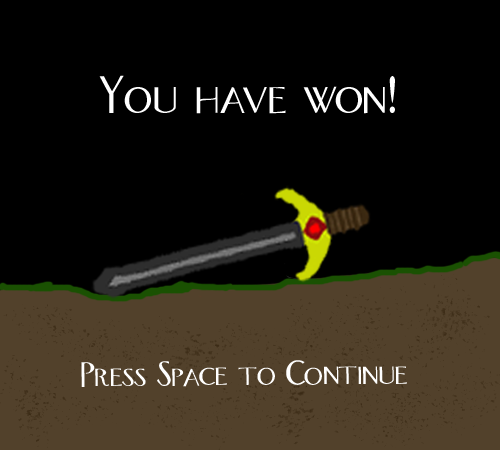
<style>
.page{position:relative;width:500px;height:450px;background:#000000}
.page>*{position:absolute;margin:0}
.t1{font:49.8px "Orlando";color:#ffffff}
.t2{font:33.2px "Orlando";color:#ffffff}
</style>
<div class="page">
<p class="t1" style="left:99px;top:75px;width:296px;height:39px">You have won!</p>
<p class="t2" style="left:81px;top:360px;width:326px;height:27px;rotate:-1deg">Press Space to Continue</p>
</div>
